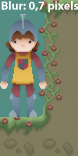
<style>
.page{position:relative;width:78px;height:156px}
.page>*{position:absolute;margin:0}
.t1{font:12px "MyriadPro-Bold";color:#ffffff}
</style>
<div class="page">
<p class="t1" style="left:1px;top:1px;width:78px;height:12px">Blur: 0,7 pixels</p>
</div>
